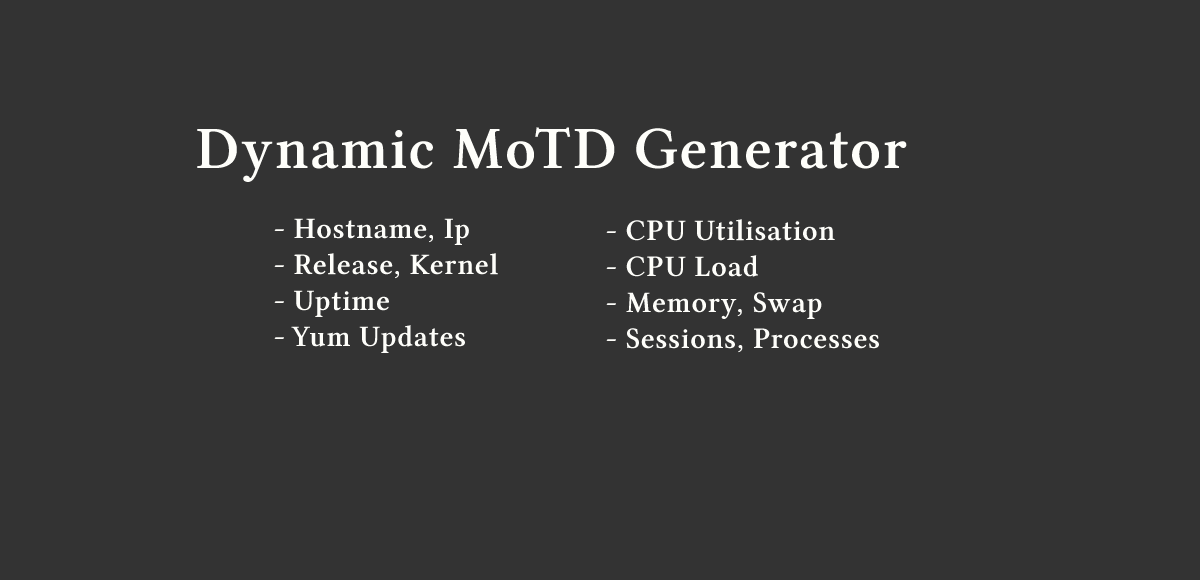
<style>
.page{position:relative;width:1200px;height:580px;background:#333333}
.page>*{position:absolute;margin:0}
.t1{font:60px "LinuxLibertineGZ";letter-spacing:0.025em;color:#fefefa}
.t2{font:30px "LinuxLibertineGZ";letter-spacing:0.025em;color:#fefefa}
</style>
<div class="page">
<p class="t1" style="left:197px;top:127px;width:710px;height:55px">Dynamic MoTD Generator</p>
<p class="t2" style="left:274px;top:218px;width:224px;height:135px">- Hostname, Ip<br>- Release, Kernel<br>- Uptime<br>- Yum Updates</p>
<p class="t2" style="left:606px;top:219px;width:273px;height:134px">- CPU Utilisation<br>- CPU Load<br>- Memory, Swap<br>- Sessions, Processes</p>
</div>
